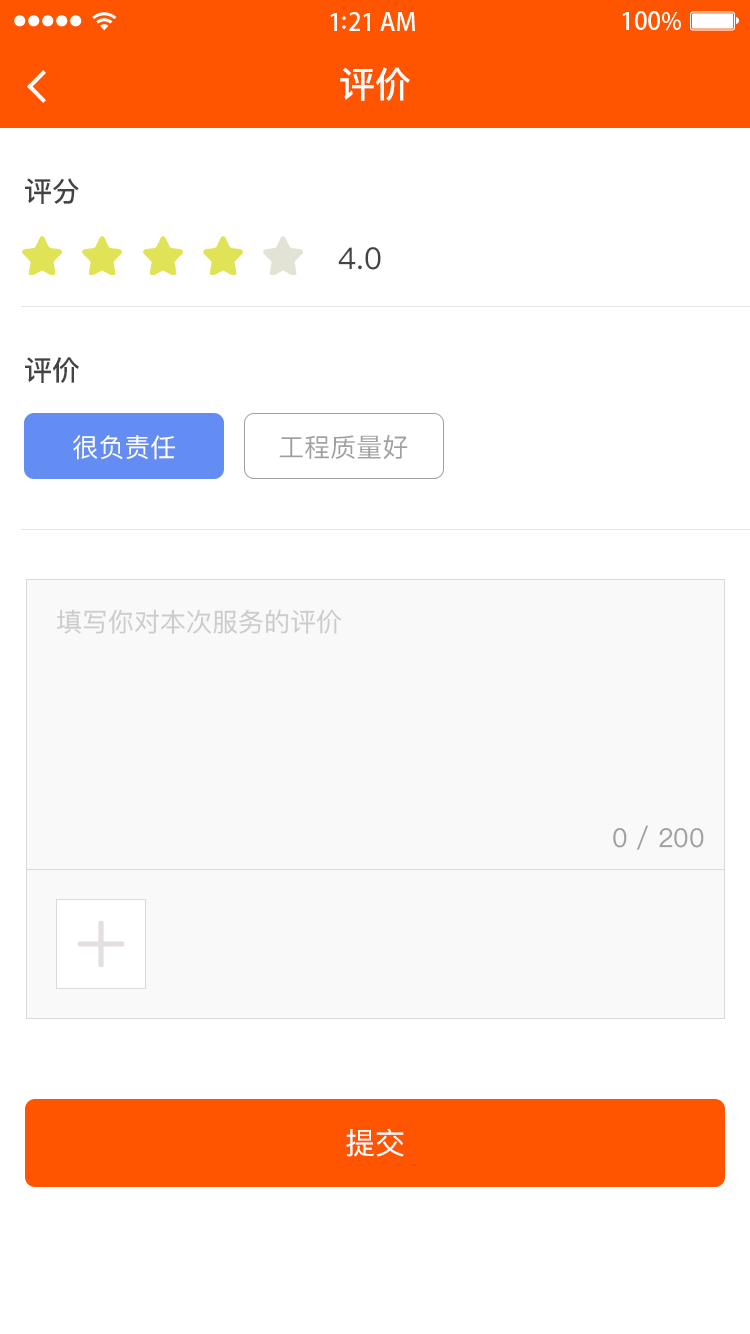
<style>
.page{position:relative;width:750px;height:1334px;background:#ffffff}
.page>*{position:absolute;margin:0}
.t1{font:36px "PingFangSC-Medium";color:#ffffff}
.t2{font:28px "PingFangSC-Medium";color:#434343}
.t3{font:30px "PingFangSC-Regular";color:#434343}
.t4{font:26px "PingFangSC-Regular";color:#ffffff;text-transform:uppercase}
.t5{font:26px "PingFangSC-Regular";color:#a0a0a0;text-transform:uppercase}
.t6{font:26px "PingFangSC-Regular";color:#cccccc}
.t7{font:26px "PingFangSC-Regular";color:#a0a0a0}
.t8{font:30px "PingFangSC-Regular";color:#ffffff;text-transform:uppercase}
</style>
<div class="page">
<p class="t1" style="left:340px;top:67px;width:70px;height:34px">评价</p>
<p class="t2" style="left:25px;top:178px;width:54px;height:26px">评分</p>
<p class="t3" style="left:338px;top:247px;width:43px;height:23px">4.0</p>
<p class="t2" style="left:25px;top:357px;width:54px;height:26px">评价</p>
<p class="t4" style="left:73px;top:435px;width:102px;height:25px">很负责任</p>
<p class="t5" style="left:279px;top:435px;width:129px;height:25px">工程质量好</p>
<p class="t6" style="left:57px;top:609px;width:284px;height:25px">填写你对本次服务的评价</p>
<p class="t7" style="left:613px;top:825px;width:91px;height:25px">0 / 200</p>
<p class="t8" style="left:346px;top:1128px;width:58px;height:29px">提交</p>
</div>
